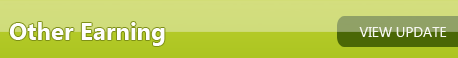
<style>
.page{position:relative;width:458px;height:58px}
.page>*{position:absolute;margin:0}
.t1{font:24px "SegoeUI-Bold";color:#fefefe}
.t2{font:14px "SegoeUI";color:#f6f7f1}
</style>
<div class="page">
<p class="t1" style="left:9px;top:22px;width:156px;height:24px">Other Earning</p>
<p class="t2" style="left:359px;top:27px;width:88px;height:10px">VIEW UPDATE</p>
</div>
